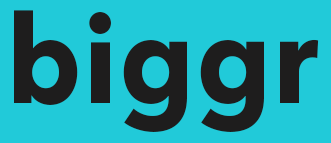
<style>
.page{position:relative;width:331px;height:143px;background:#21cad9}
.page>*{position:absolute;margin:0}
.t1{font:121.6px "AvenirNextLTPro-Bold";letter-spacing:0.013em;color:#1e1d1d;scale:0.95 1}
</style>
<div class="page">
<p class="t1" style="left:14px;top:10px;width:305px;height:122px">biggr</p>
</div>
